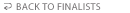
<style>
.page{position:relative;width:130px;height:13px;background:#ffffff}
.page>*{position:absolute;margin:0}
.t1{font:10px "MyriadPro-Regular";letter-spacing:0.025em;color:#787576}
</style>
<div class="page">
<p class="t1" style="left:16px;top:3px;width:85px;height:7px">BACK TO FINALISTS</p>
</div>
